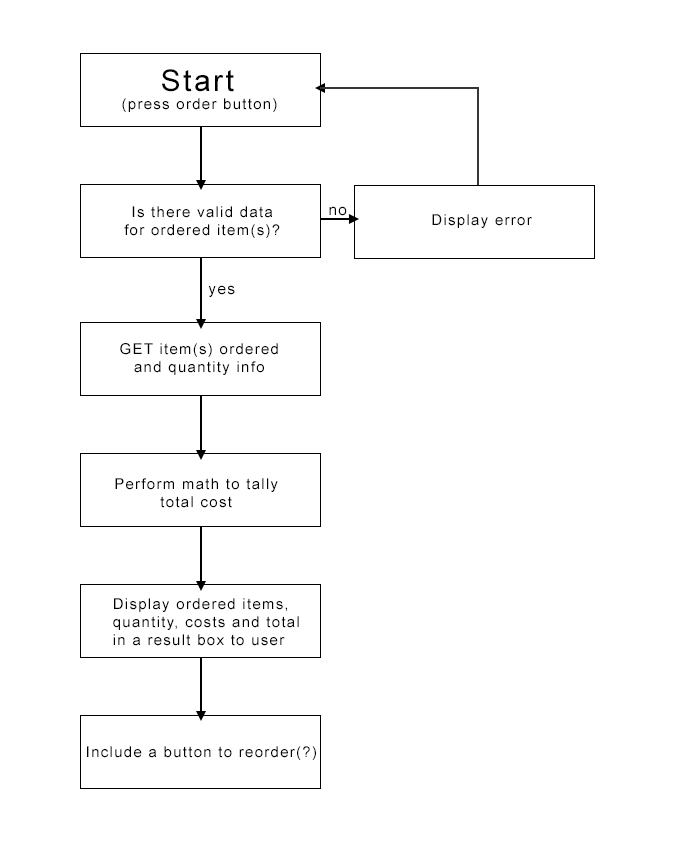
<style>
.page{position:relative;width:679px;height:849px;background:#ffffff}
.page>*{position:absolute;margin:0}
.t1{font:30px "ArialMT";letter-spacing:0.085em;color:#000000}
.t2{font:15px "ArialMT";letter-spacing:0.085em;color:#000000}
.t3{font:15.3px "ArialMT";letter-spacing:0.085em;color:#000000}
</style>
<div class="page">
<p class="t1" style="left:162px;top:69px;width:72px;height:23px">Start</p>
<p class="t2" style="left:122px;top:98px;width:155px;height:14px">(press order button)</p>
<p class="t2" style="left:124px;top:206px;width:156px;height:32px;text-align:center">Is there valid data<br>for ordered item(s)?</p>
<p class="t3" style="left:329px;top:206px;width:18px;height:10px">no</p>
<p class="t2" style="left:432px;top:214px;width:100px;height:14px">Display error</p>
<p class="t3" style="left:208px;top:285px;width:27px;height:12px">yes</p>
<p class="t2" style="left:120px;top:343px;width:158px;height:32px;text-align:center">GET item(s) ordered<br>and quantity info</p>
<p class="t2" style="left:115px;top:478px;width:163px;height:30px;text-align:center">Perform math to tally<br>total cost</p>
<p class="t2" style="left:113px;top:598px;width:186px;height:48px">Display ordered items,<br>quantity, costs and total<br>in a result box to user</p>
<p class="t2" style="left:87px;top:746px;width:229px;height:14px">Include a button to reorder(?)</p>
</div>
